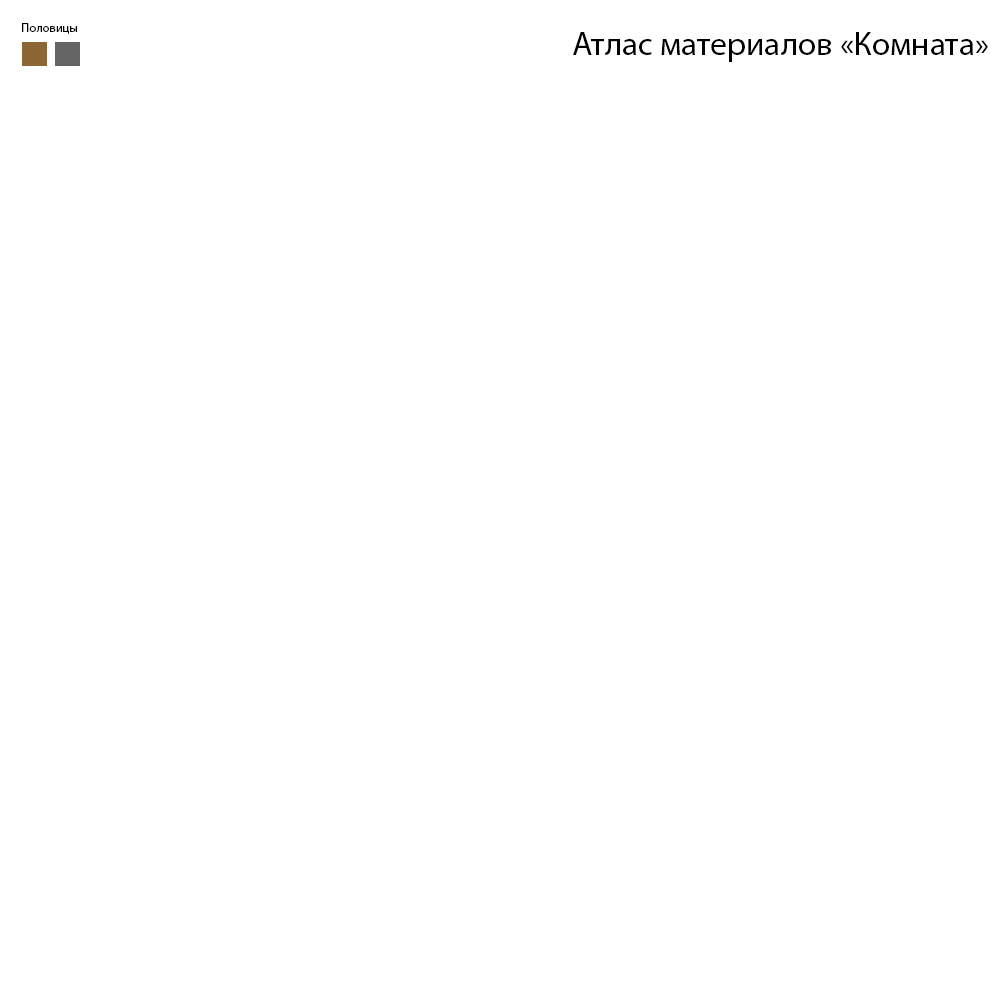
<style>
.page{position:relative;width:1000px;height:1000px;background:#ffffff}
.page>*{position:absolute;margin:0}
.t1{font:12.5px "MyriadPro-Regular";letter-spacing:0.001em;color:#000000}
.t2{font:33.3px "MyriadPro-Regular";letter-spacing:0.001em;color:#000000}
</style>
<div class="page">
<p class="t1" style="left:22px;top:23px;width:55px;height:11px">Половицы</p>
<p class="t2" style="left:573px;top:32px;width:415px;height:30px">Атлас материалов «Комната»</p>
</div>
